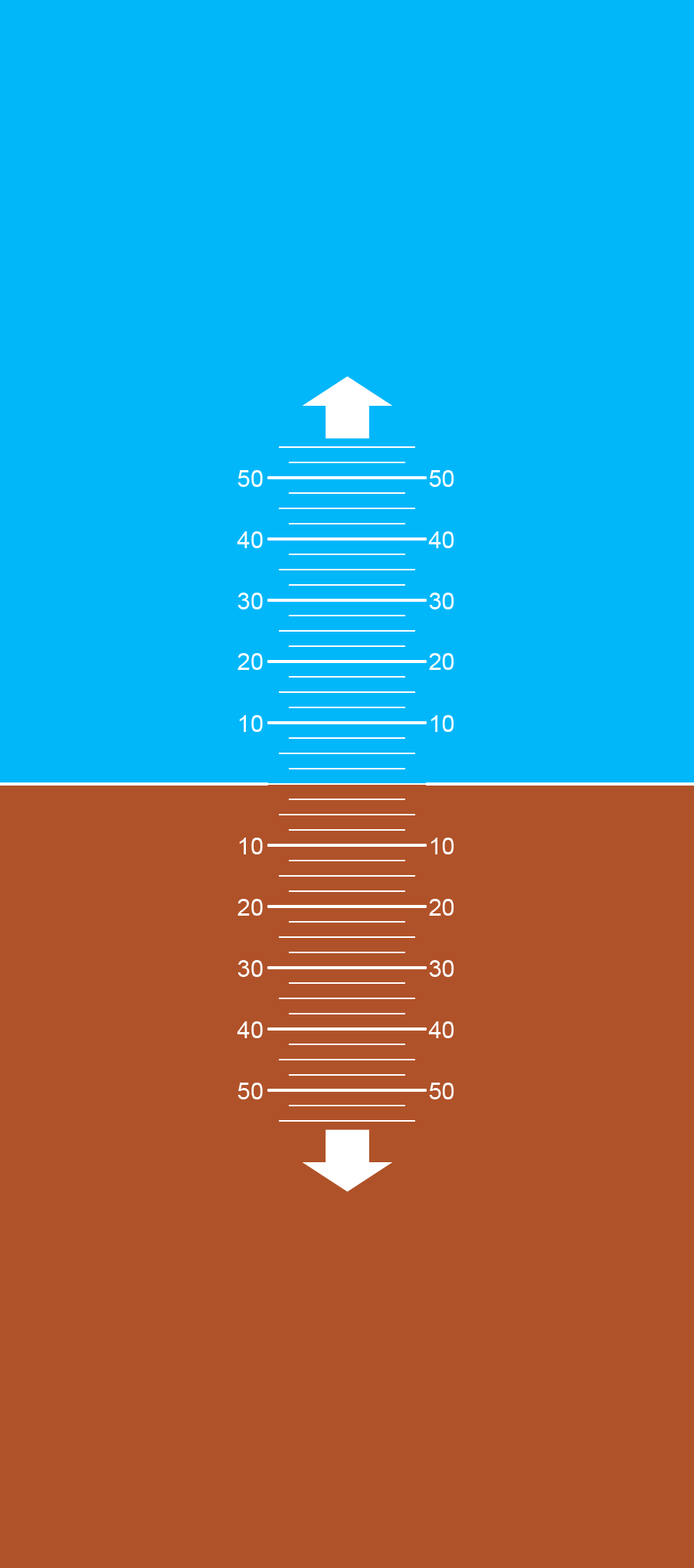
<style>
.page{position:relative;width:694px;height:1568px;background:#b05229}
.page>*{position:absolute;margin:0}
.t1{font:23.7px "ArialMT";color:#ffffff}
</style>
<div class="page">
<p class="t1" style="left:237px;top:470px;width:217px;height:17px">50                         50</p>
<p class="t1" style="left:237px;top:531px;width:217px;height:17px">40                         40</p>
<p class="t1" style="left:237px;top:593px;width:217px;height:16px">30                         30</p>
<p class="t1" style="left:237px;top:653px;width:217px;height:17px">20                         20</p>
<p class="t1" style="left:239px;top:715px;width:215px;height:17px">10                         10</p>
<p class="t1" style="left:239px;top:838px;width:215px;height:16px">10                         10</p>
<p class="t1" style="left:237px;top:899px;width:217px;height:17px">20                         20</p>
<p class="t1" style="left:237px;top:960px;width:217px;height:17px">30                         30</p>
<p class="t1" style="left:237px;top:1021px;width:217px;height:17px">40                         40</p>
<p class="t1" style="left:237px;top:1083px;width:217px;height:16px">50                         50</p>
</div>
